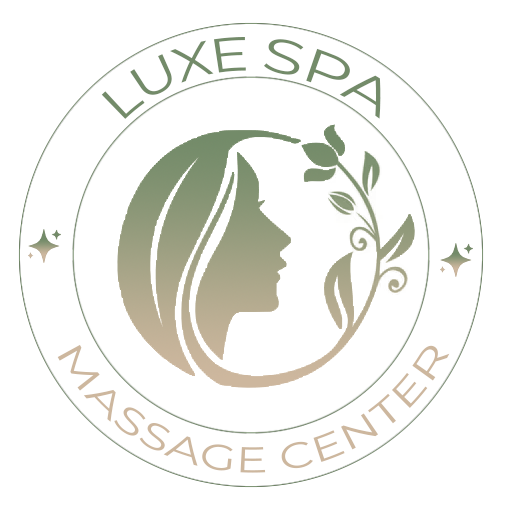
<style>
.page{position:relative;width:512px;height:512px;background:#ffffff}
.page>*{position:absolute;margin:0}
.t1{font:48px "Montserrat-Regular";color:#738b69}
.t2{font:36px "Montserrat-Regular";color:#cdb79e}
</style>
<div class="page">
<p class="t1" style="left:101px;top:36px;width:145px;height:83px;rotate:-25deg">LUXE</p>
<p class="t1" style="left:264px;top:39px;width:117px;height:80px;rotate:22deg">SPA</p>
<p class="t2" style="left:57px;top:344px;width:393px;height:129px">MASSAGE CENTER</p>
</div>
